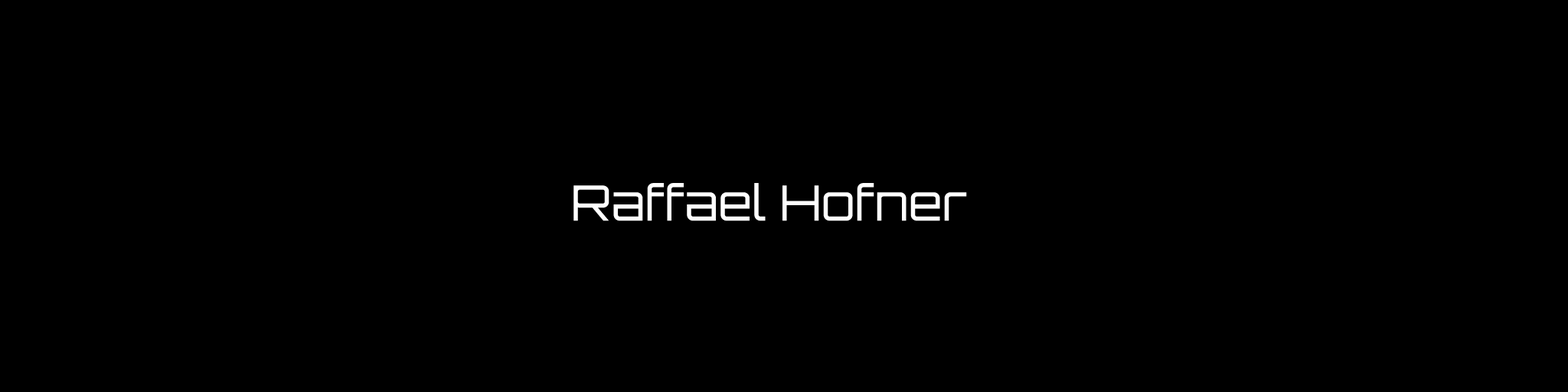
<style>
.page{position:relative;width:1568px;height:392px;background:#000000}
.page>*{position:absolute;margin:0}
.t1{font:48.6px "Orbitron-Light";color:#ffffff}
</style>
<div class="page">
<p class="t1" style="left:573px;top:183px;width:394px;height:38px">Raffael Hofner</p>
</div>
